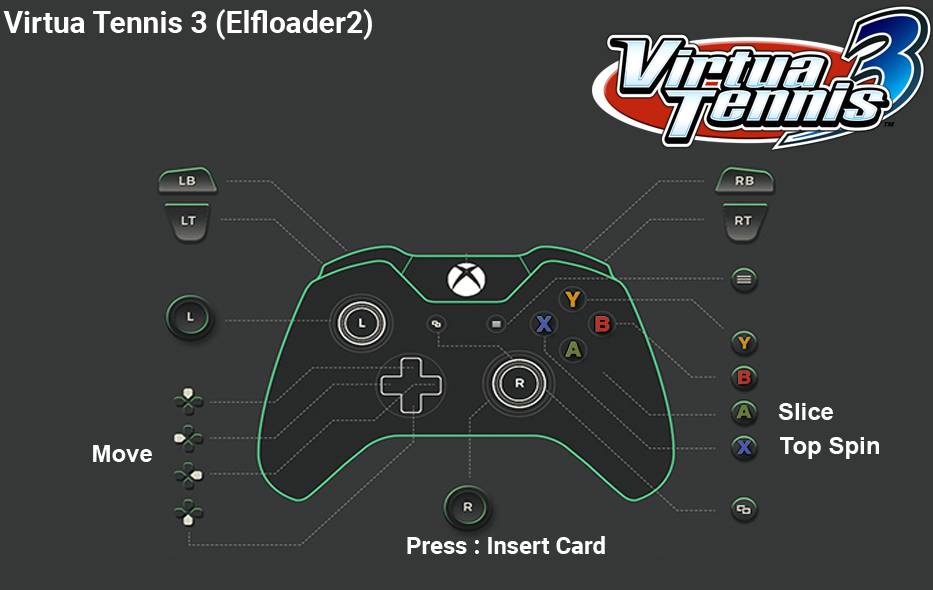
<style>
.page{position:relative;width:933px;height:590px;background:#363838}
.page>*{position:absolute;margin:0}
.t1{font:30px "Roboto-Bold";color:#ffffff}
.t2{font:24px "Arial-BoldMT";color:#fefefe}
.t3{font:24px "Roboto-Bold";color:#ffffff}
</style>
<div class="page">
<p class="t1" style="left:3px;top:9px;width:369px;height:31px">Virtua Tennis 3 (Elfloader2)</p>
<p class="t2" style="left:778px;top:403px;width:55px;height:17px">Slice</p>
<p class="t2" style="left:780px;top:437px;width:99px;height:22px">Top Spin</p>
<p class="t2" style="left:93px;top:445px;width:59px;height:17px">Move</p>
<p class="t3" style="left:407px;top:536px;width:198px;height:18px">Press : Insert Card</p>
</div>
